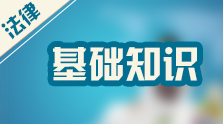
<style>
.page{position:relative;width:223px;height:124px}
.page>*{position:absolute;margin:0}
.t1{font:20.6px "JLinXin";color:#016f92}
.t2{font:37px "JLinXin";color:#f8f5e4}
</style>
<div class="page">
<p class="t1" style="left:1px;top:1px;width:40px;height:39px;rotate:-40deg">法律</p>
<p class="t2" style="left:53px;top:47px;width:144px;height:34px">基础知识</p>
</div>
